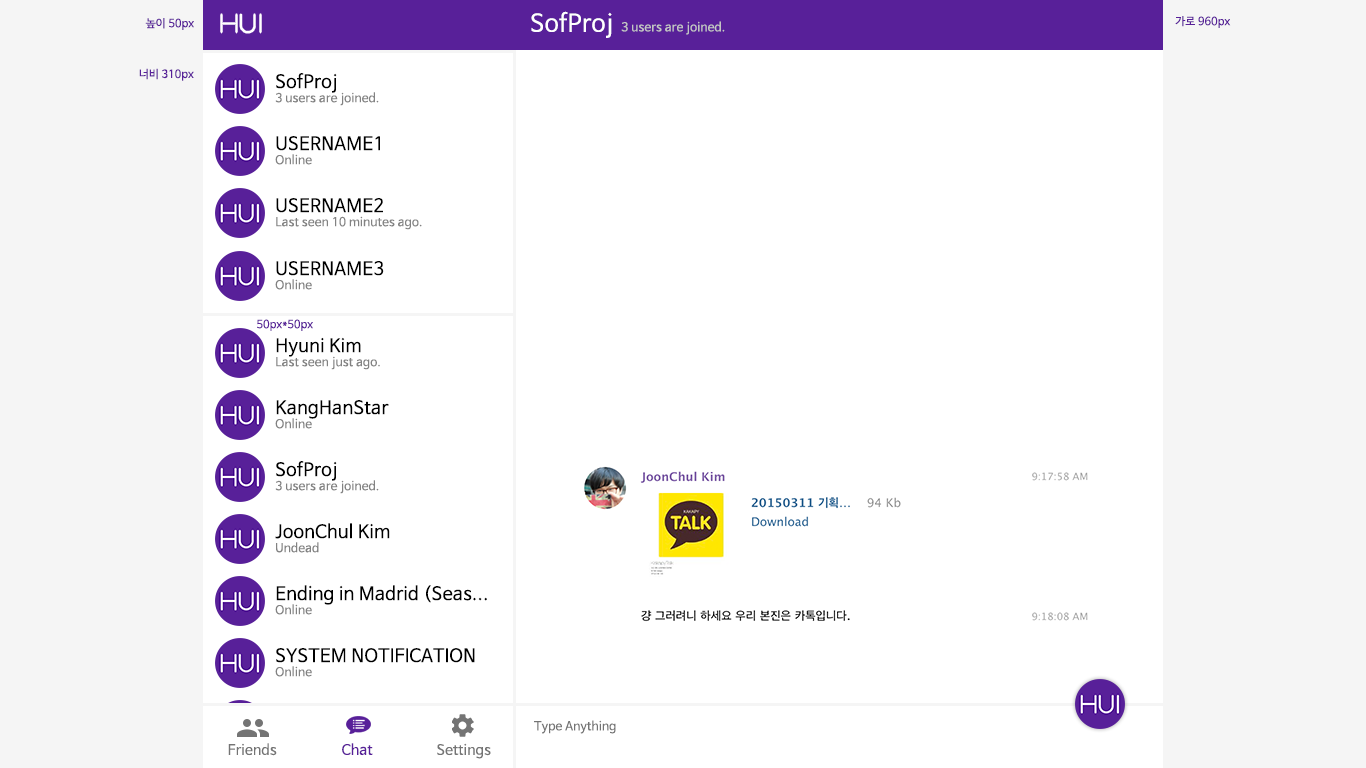
<style>
.page{position:relative;width:1366px;height:768px;background:#ffffff}
.page>*{position:absolute;margin:0}
.t1{font:24px "SlimJoe";letter-spacing:0.016em;color:#ffffff}
.t2{font:24px "NanumBarunGothicOTF";letter-spacing:0.016em;color:#ffffff}
.t3{font:11px "NanumBarunGothicOTF";letter-spacing:0.016em;color:#582099}
.t4{font:12px "NanumBarunGothicOTF";letter-spacing:0.016em;color:#c4c4c4}
.t5{font:12px "NanumBarunGothicOTF";letter-spacing:0.016em;color:#828282}
.t6{font:18px "NanumBarunGothicOTF";letter-spacing:0.016em;color:#000000}
.t7{font:12px "NanumBarunGothicOTF";letter-spacing:0.016em;color:#747474}
.t8{font:14px "NanumBarunGothicOTF";letter-spacing:0.016em;color:#747474}
.t9{font:14px "NanumBarunGothicOTF";letter-spacing:0.016em;color:#582099}
</style>
<div class="page">
<p class="t1" style="left:221px;top:14px;width:40px;height:19px">HUI</p>
<p class="t2" style="left:531px;top:11px;width:81px;height:27px">SofProj</p>
<p class="t3" style="left:1175px;top:16px;width:56px;height:12px">가로 960px</p>
<p class="t3" style="left:145px;top:18px;width:49px;height:12px">높이 50px</p>
<p class="t4" style="left:621px;top:21px;width:104px;height:14px">3 users are joined.</p>
<p class="t3" style="left:139px;top:68px;width:55px;height:13px">너비 310px</p>
<p class="t5" style="left:275px;top:73px;width:104px;height:33px"><span class="t6">SofProj<br></span>3 users are joined.</p>
<p class="t6" style="left:275px;top:136px;width:105px;height:29px">USERNAME1<br><span class="t5">Online</span></p>
<p class="t5" style="left:276px;top:198px;width:146px;height:32px"><span class="t6">USERNAME2<br></span>Last seen 10 minutes ago.</p>
<p class="t6" style="left:275px;top:261px;width:109px;height:29px">USERNAME3<br><span class="t5">Online</span></p>
<p class="t3" style="left:257px;top:319px;width:56px;height:12px">50px*50px</p>
<p class="t5" style="left:276px;top:337px;width:104px;height:33px"><span class="t6">Hyuni Kim<br></span>Last seen just ago.</p>
<p class="t6" style="left:275px;top:400px;width:114px;height:29px">KangHanStar<br><span class="t5">Online</span></p>
<p class="t5" style="left:275px;top:461px;width:104px;height:33px"><span class="t6">SofProj<br></span>3 users are joined.</p>
<p class="t6" style="left:275px;top:523px;width:115px;height:30px">JoonChul Kim<br><span class="t5">Undead</span></p>
<p class="t6" style="left:275px;top:585px;width:212px;height:30px">Ending in Madrid (Seas...<br><span class="t5">Online</span></p>
<p class="t6" style="left:275px;top:648px;width:200px;height:29px">SYSTEM NOTIFICATION<br><span class="t5">Online</span></p>
<p class="t7" style="left:534px;top:720px;width:82px;height:14px">Type Anything</p>
<p class="t8" style="left:228px;top:743px;width:49px;height:13px">Friends</p>
<p class="t9" style="left:342px;top:743px;width:31px;height:13px">Chat</p>
<p class="t8" style="left:437px;top:743px;width:54px;height:16px">Settings</p>
</div>
